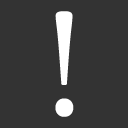
<style>
.page{position:relative;width:128px;height:128px;background:#333333}
.page>*{position:absolute;margin:0}
.t1{font:156px "MinionPro-Regular";color:#ffffff}
</style>
<div class="page">
<p class="t1" style="left:55px;top:11px;width:19px;height:106px">!</p>
</div>
